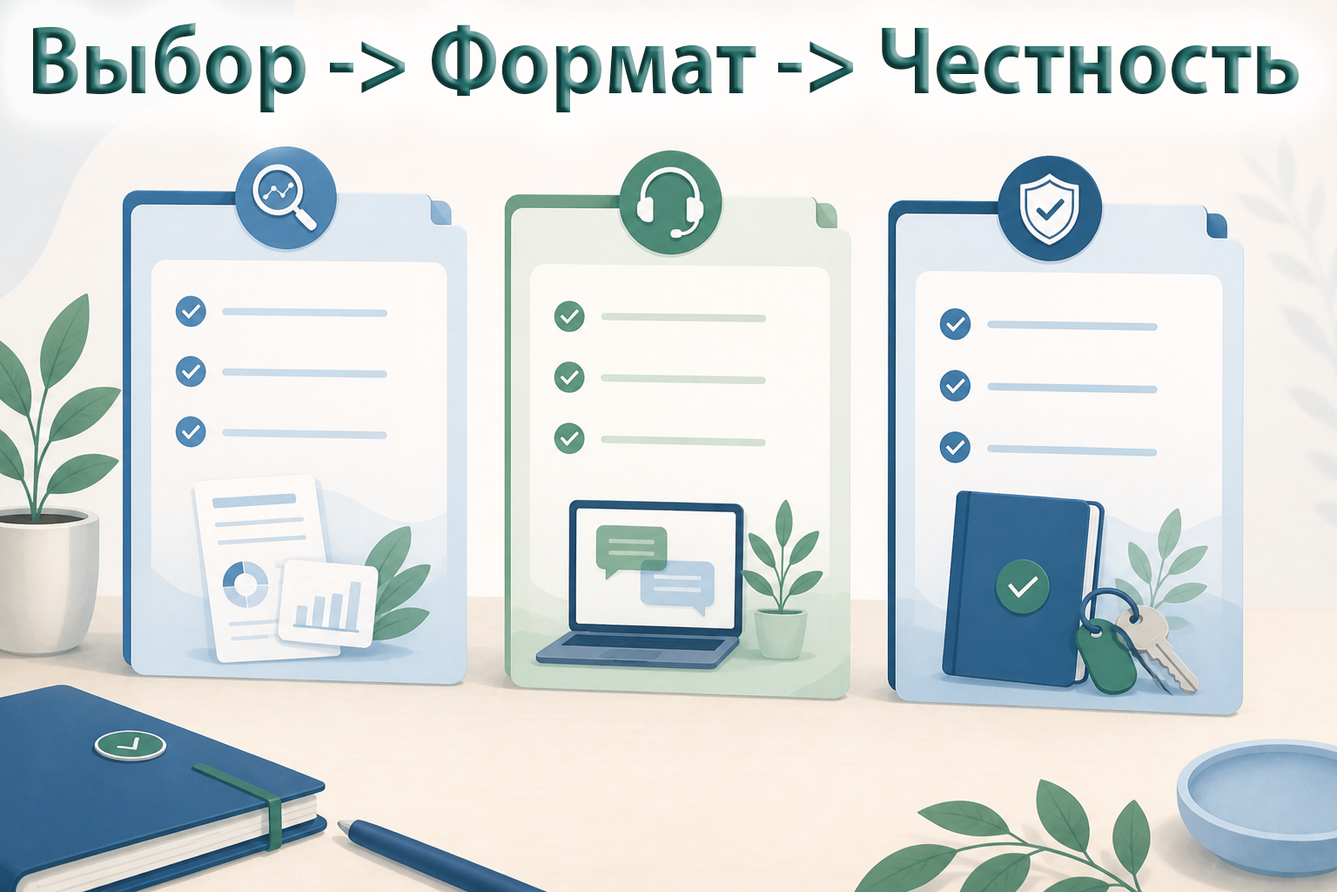
<style>
.page{position:relative;width:1337px;height:892px}
.page>*{position:absolute;margin:0}
.t1{font:97.5px "MyriadPro-Bold";scale:0.92 1}
</style>
<div class="page">
<p class="t1" style="left:33px;top:23px;width:1266px;height:89px">Выбор -&gt; Формат -&gt; Честность</p>
</div>
